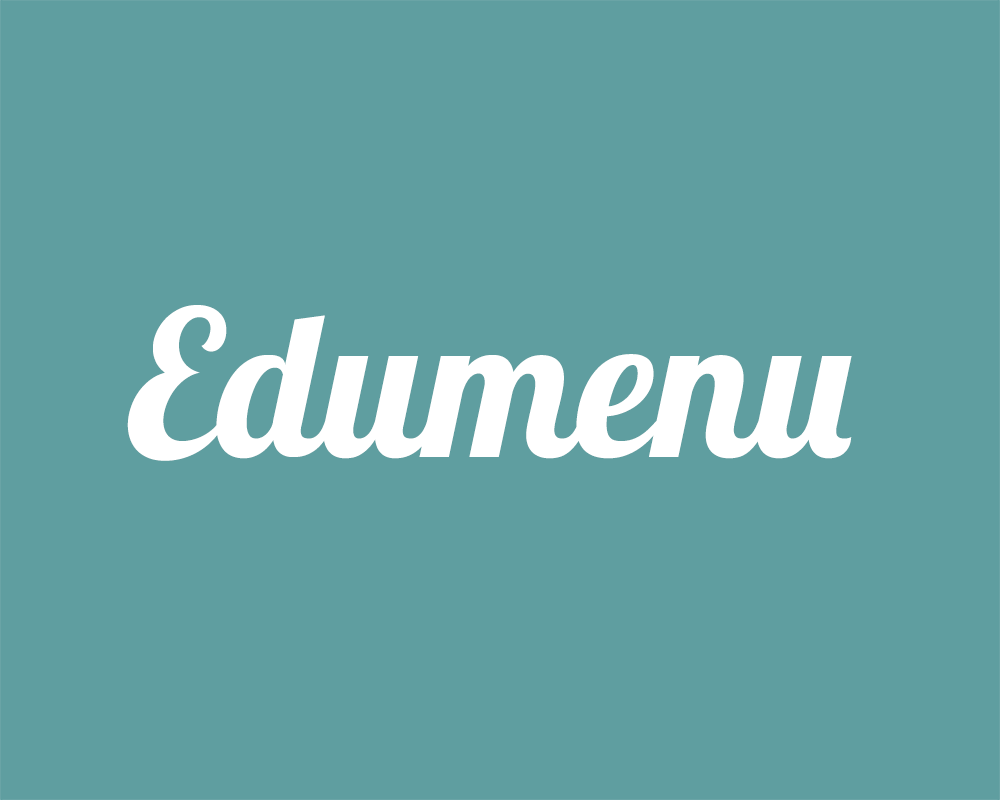
<style>
.page{position:relative;width:1000px;height:800px;background:#5f9ea0}
.page>*{position:absolute;margin:0}
.t1{font:202px "Lobster-Regular";color:#ffffff}
</style>
<div class="page">
<p class="t1" style="left:127px;top:305px;width:725px;height:156px">Edumenu</p>
</div>
